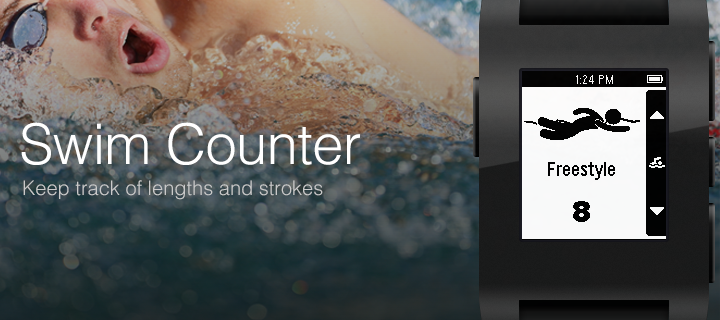
<style>
.page{position:relative;width:720px;height:320px}
.page>*{position:absolute;margin:0}
.t1{font:56px "Helvetica-Light";letter-spacing:-0.01em;color:#ffffff}
.t2{font:20px "Helvetica-Light";color:#cacaca}
</style>
<div class="page">
<p class="t1" style="left:21px;top:122px;width:339px;height:43px">Swim Counter</p>
<p class="t2" style="left:23px;top:180px;width:300px;height:20px">Keep track of lengths and strokes</p>
</div>
